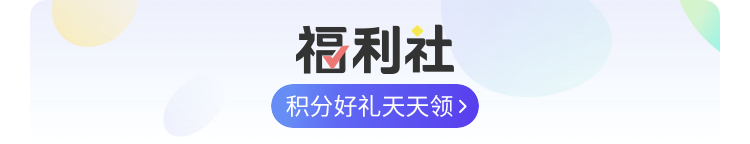
<style>
.page{position:relative;width:750px;height:144px}
.page>*{position:absolute;margin:0}
.t1{font:24px "SourceHanSansCN-Regular";color:#ffffff}
</style>
<div class="page">
<p class="t1" style="left:286px;top:94px;width:167px;height:23px">积分好礼天天领</p>
</div>
